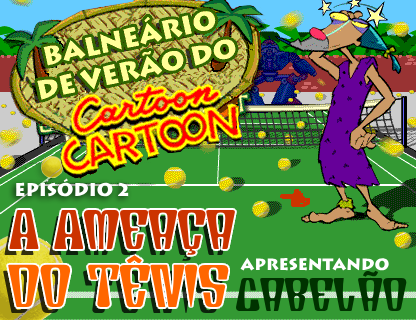
<style>
.page{position:relative;width:416px;height:320px;background:#339933}
.page>*{position:absolute;margin:0}
.t1{font:18.3px "Lithos-Black";color:#ffffff}
.t2{font:55.6px "TikiWood";letter-spacing:0.06em;color:#cc3300}
.t3{font:16.3px "Lithos-Black";color:#ffffff}
.t4{font:60.2px "TikiWood";letter-spacing:0.06em;color:#ff6600}
.t5{font:47.1px "TikiWood";letter-spacing:0.06em;color:#339933}
.t6{font:47.1px "TikiWood";letter-spacing:0.06em;color:#003300}
</style>
<div class="page">
<p class="t1" style="left:16px;top:178px;width:113px;height:19px">episódio 2</p>
<p class="t2" style="left:9px;top:210px;width:226px;height:45px">A Ameaça</p>
<p class="t3" style="left:240px;top:257px;width:149px;height:14px">Apresentando</p>
<p class="t4" style="left:8px;top:264px;width:221px;height:43px">do tenis</p>
<p class="t5" style="left:236px;top:278px;width:171px;height:33px">Cabel<span class="t6">ao</span></p>
</div>
